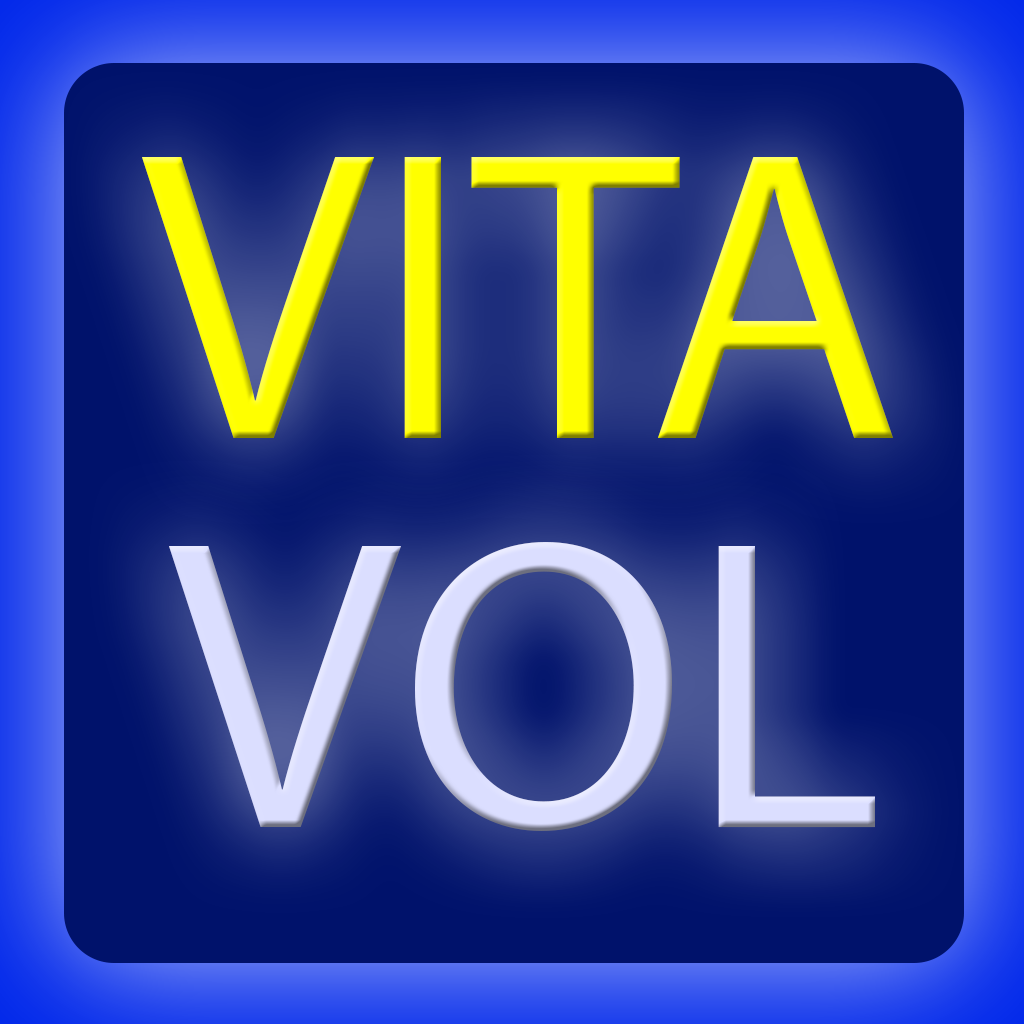
<style>
.page{position:relative;width:1024px;height:1024px}
.page>*{position:absolute;margin:0}
.t1{font:416.7px "MyriadPro-Regular";color:#ffff00}
.t2{font:416.7px "MyriadPro-Regular";color:#dbdeff}
</style>
<div class="page">
<p class="t1" style="left:142px;top:157px;width:751px;height:281px">VITA</p>
<p class="t2" style="left:169px;top:542px;width:706px;height:289px">VOL</p>
</div>
